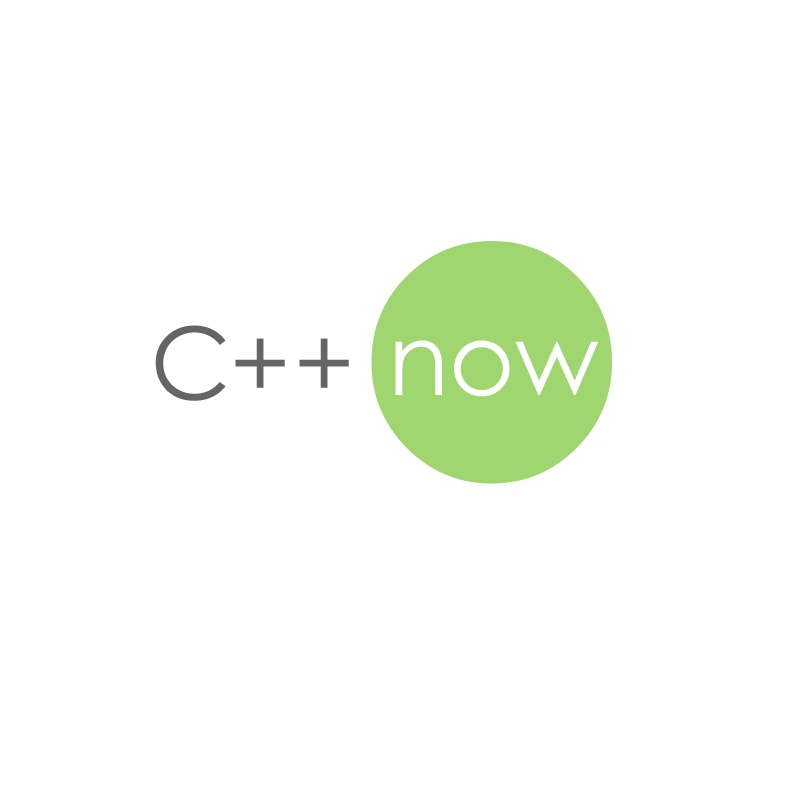
<style>
.page{position:relative;width:800px;height:800px;background:#ffffff}
.page>*{position:absolute;margin:0}
.t1{font:2000px "CenturyGothic";color:#9fd66f}
.t2{font:100px "CenturyGothic";color:#656565}
.t3{font:100px "CenturyGothic";letter-spacing:0.03em;color:#656565}
.t4{font:100px "CenturyGothic";color:#ffffff}
</style>
<div class="page">
<p class="t1" style="left:371px;top:241px;width:241px;height:243px">.</p>
<p class="t2" style="left:155px;top:325px;width:71px;height:76px">C</p>
<p class="t3" style="left:235px;top:338px;width:114px;height:50px">++</p>
<p class="t4" style="left:395px;top:340px;width:204px;height:57px">now</p>
</div>
